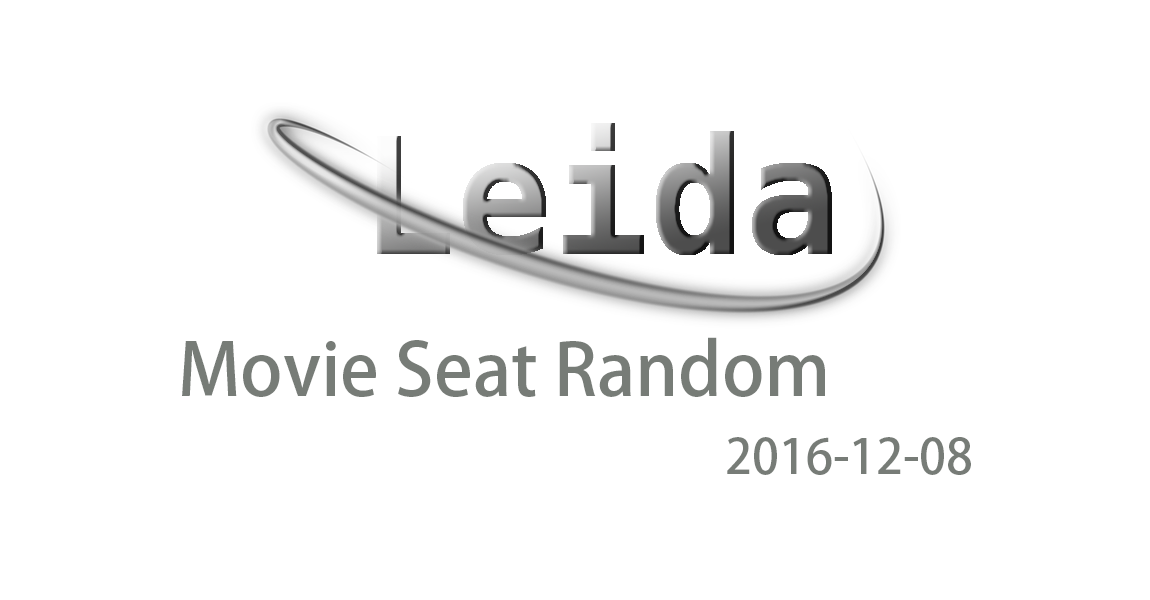
<style>
.page{position:relative;width:1150px;height:600px;background:#ffffff}
.page>*{position:absolute;margin:0}
.t1{font:72px "AdobeHeitiStd-Regular";color:#777c77}
.t2{font:48px "AdobeHeitiStd-Regular";color:#777c77}
</style>
<div class="page">
<p class="t1" style="left:182px;top:337px;width:643px;height:60px">Movie Seat Random</p>
<p class="t2" style="left:727px;top:437px;width:244px;height:38px">2016-12-08</p>
</div>
